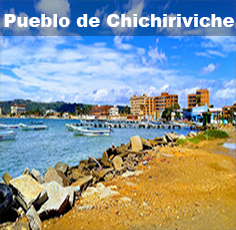
<style>
.page{position:relative;width:236px;height:230px}
.page>*{position:absolute;margin:0}
.t1{font:18px "Arial-Black";color:#ffffff}
</style>
<div class="page">
<p class="t1" style="left:4px;top:14px;width:230px;height:13px">Pueblo de Chichiriviche</p>
</div>
